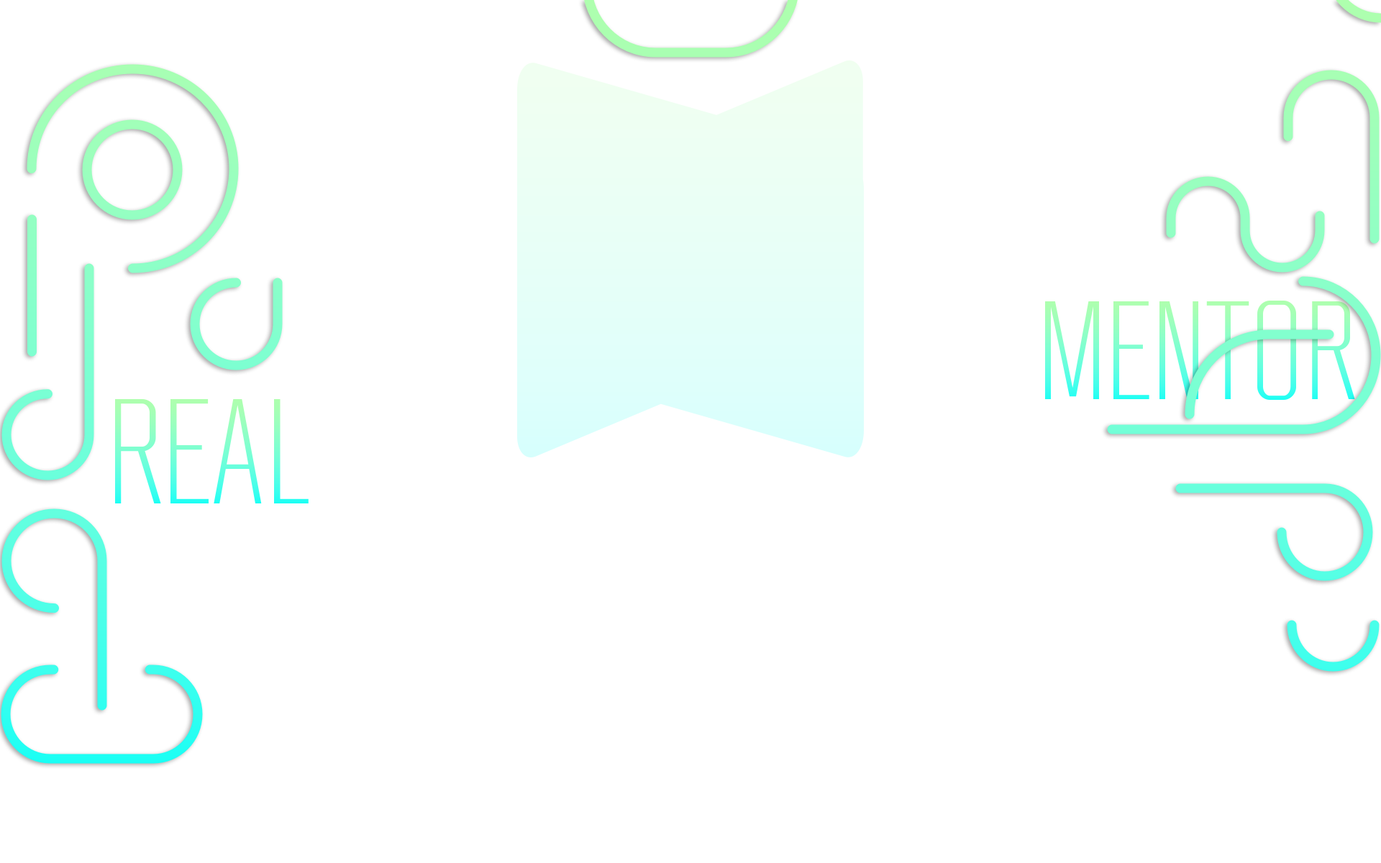
<style>
.page{position:relative;width:1381px;height:863px;background:#ffffff}
.page>*{position:absolute;margin:0}
.t1{font:138.7px "RBNo2-Light"}
.t2{font:148.1px "RBNo2-Light"}
</style>
<div class="page">
<p class="t1" style="left:1045px;top:301px;width:310px;height:99px">MENTOR</p>
<p class="t2" style="left:115px;top:399px;width:194px;height:105px">REAL</p>
</div>
